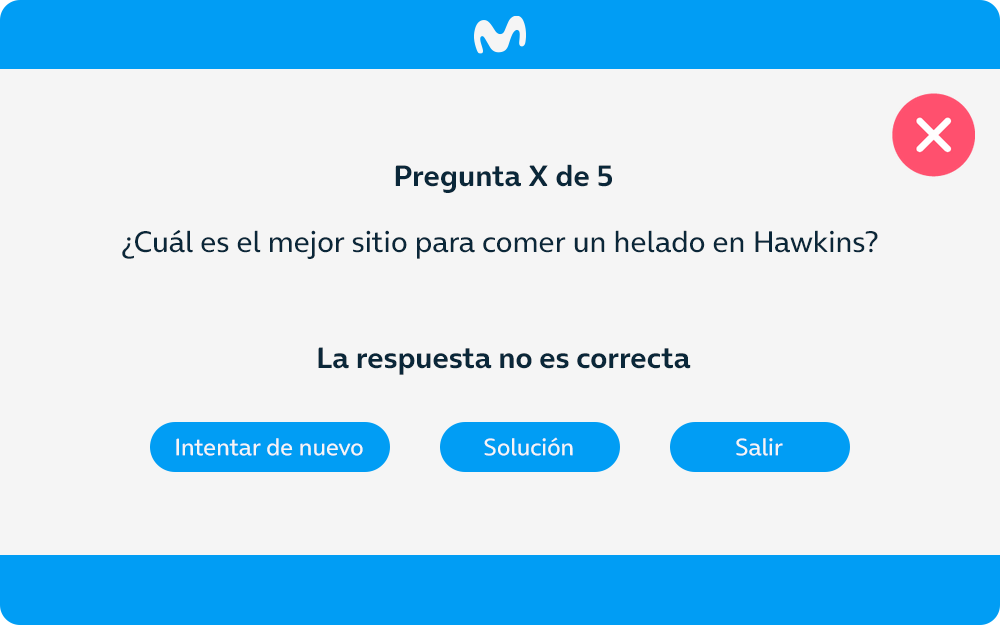
<style>
.page{position:relative;width:1000px;height:625px;background:#f5f5f5}
.page>*{position:absolute;margin:0}
.t1{font:30px "OnAir-Bold";color:#0a2739}
.t2{font:30px "OnAir-Regular";color:#0a2739}
.t3{font:24px "OnAir-Regular";color:#f5f5f5}
</style>
<div class="page">
<p class="t1" style="left:395px;top:164px;width:217px;height:29px">Pregunta X de 5</p>
<p class="t2" style="left:122px;top:230px;width:756px;height:29px">¿Cuál es el mejor sitio para comer un helado en Hawkins?</p>
<p class="t1" style="left:318px;top:347px;width:373px;height:28px">La respuesta no es correcta</p>
<p class="t3" style="left:176px;top:438px;width:187px;height:18px">Intentar de nuevo</p>
<p class="t3" style="left:484px;top:437px;width:89px;height:19px">Solución</p>
<p class="t3" style="left:736px;top:438px;width:47px;height:18px">Salir</p>
</div>
